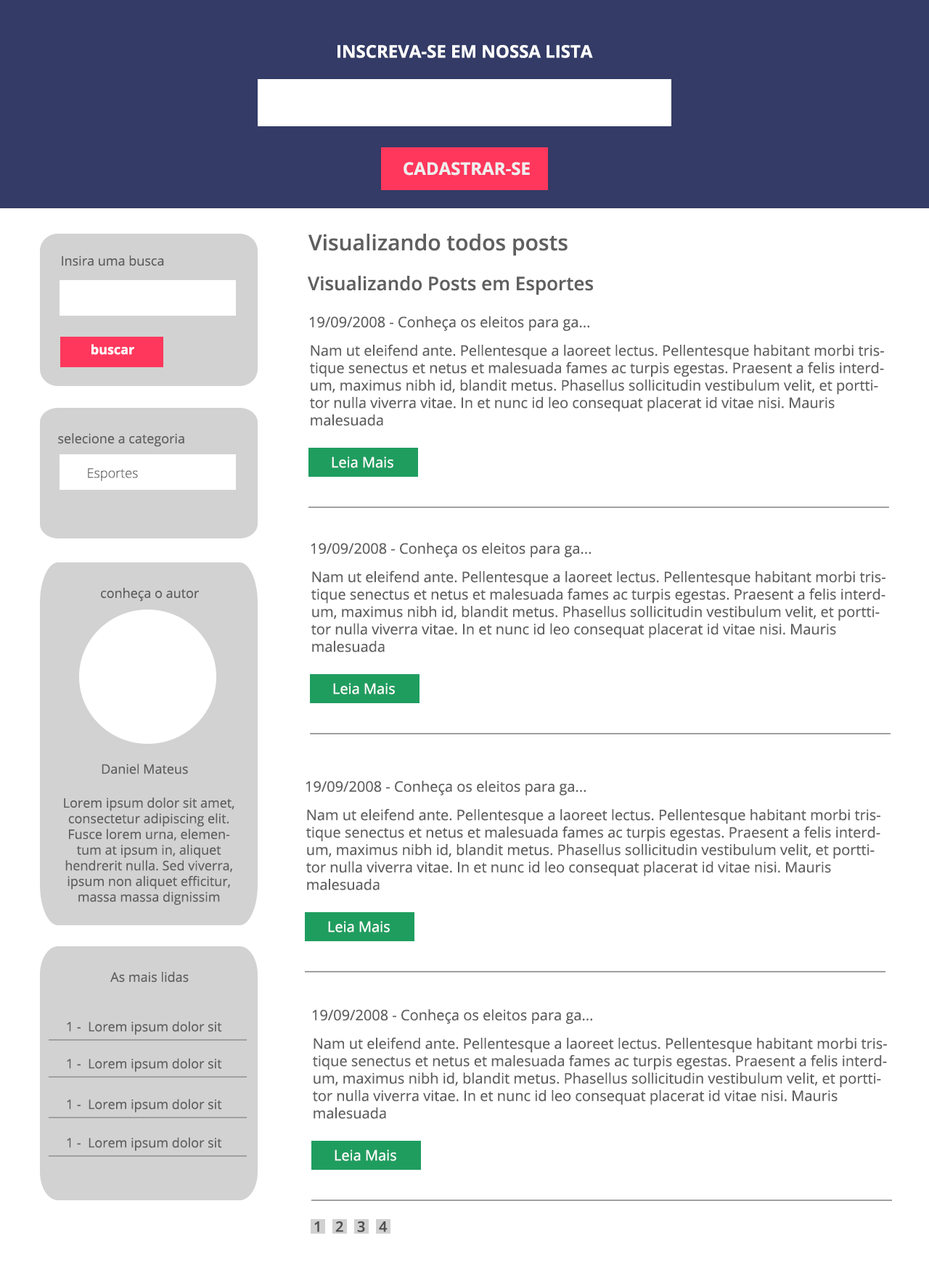
<style>
.page{position:relative;width:929px;height:1283px;background:#ffffff}
.page>*{position:absolute;margin:0}
.t1{font:17.4px "OpenSans-Bold";color:#ffffff}
.t2{font:17.4px "OpenSans-Bold";color:#eeeeee}
.t3{font:21.8px "OpenSans-SemiBold";color:#605f5f}
.t4{font:13.1px "OpenSans-Regular";color:#605f5f}
.t5{font:18.9px "OpenSans-SemiBold";color:#605f5f}
.t6{font:14.5px "OpenSans-Regular";color:#605f5f}
.t7{font:13.1px "OpenSans-Bold";color:#ffffff}
.t8{font:14.5px "OpenSans-Regular";color:#ffffff}
.t9{font:13.1px "OpenSans-Light";color:#605f5f}
.t10{font:14.5px "OpenSans-SemiBold";color:#505050}
</style>
<div class="page">
<p class="t1" style="left:338px;top:45px;width:255px;height:13px">INSCREVA-SE EM NOSSA LISTA</p>
<p class="t2" style="left:404px;top:162px;width:126px;height:14px">CADASTRAR-SE</p>
<p class="t3" style="left:308px;top:234px;width:260px;height:22px">Visualizando todos posts</p>
<p class="t4" style="left:62px;top:256px;width:102px;height:10px">Insira uma busca</p>
<p class="t5" style="left:308px;top:276px;width:285px;height:19px">Visualizando Posts em Esportes</p>
<p class="t6" style="left:309px;top:316px;width:280px;height:15px">19/09/2008 - Conheça os eleitos para ga...</p>
<p class="t7" style="left:91px;top:344px;width:43px;height:11px">buscar</p>
<p class="t6" style="left:310px;top:344px;width:574px;height:82px">Nam ut eleifend ante. Pellentesque a laoreet lectus. Pellentesque habitant morbi tristique senectus et netus et malesuada fames ac turpis egestas. Praesent a felis interdum, maximus nibh id, blandit metus. Phasellus sollicitudin vestibulum velit, et porttitor nulla viverra vitae. In et nunc id leo consequat placerat id vitae nisi. Mauris malesuada</p>
<p class="t4" style="left:58px;top:433px;width:126px;height:14px">selecione a categoria</p>
<p class="t8" style="left:332px;top:457px;width:61px;height:11px">Leia Mais</p>
<p class="t9" style="left:88px;top:468px;width:50px;height:13px">Esportes</p>
<p class="t6" style="left:311px;top:542px;width:280px;height:15px">19/09/2008 - Conheça os eleitos para ga...</p>
<p class="t6" style="left:311px;top:571px;width:575px;height:82px">Nam ut eleifend ante. Pellentesque a laoreet lectus. Pellentesque habitant morbi tristique senectus et netus et malesuada fames ac turpis egestas. Praesent a felis interdum, maximus nibh id, blandit metus. Phasellus sollicitudin vestibulum velit, et porttitor nulla viverra vitae. In et nunc id leo consequat placerat id vitae nisi. Mauris malesuada</p>
<p class="t4" style="left:101px;top:588px;width:98px;height:14px">conheça o autor</p>
<p class="t8" style="left:333px;top:683px;width:62px;height:12px">Leia Mais</p>
<p class="t4" style="left:102px;top:764px;width:86px;height:11px">Daniel Mateus</p>
<p class="t6" style="left:306px;top:780px;width:280px;height:16px">19/09/2008 - Conheça os eleitos para ga...</p>
<p class="t4" style="left:64px;top:798px;width:170px;height:107px;text-align:center">Lorem ipsum dolor sit amet, consectetur adipiscing elit. Fusce lorem urna, elementum at ipsum in, aliquet hendrerit nulla. Sed viverra, ipsum non aliquet efficitur, massa massa dignissim massa,</p>
<p class="t6" style="left:306px;top:809px;width:575px;height:82px">Nam ut eleifend ante. Pellentesque a laoreet lectus. Pellentesque habitant morbi tristique senectus et netus et malesuada fames ac turpis egestas. Praesent a felis interdum, maximus nibh id, blandit metus. Phasellus sollicitudin vestibulum velit, et porttitor nulla viverra vitae. In et nunc id leo consequat placerat id vitae nisi. Mauris malesuada</p>
<p class="t8" style="left:328px;top:921px;width:62px;height:12px">Leia Mais</p>
<p class="t4" style="left:110px;top:972px;width:79px;height:11px">As mais lidas</p>
<p class="t6" style="left:312px;top:1009px;width:280px;height:15px">19/09/2008 - Conheça os eleitos para ga...</p>
<p class="t4" style="left:67px;top:1021px;width:155px;height:14px">1 -  Lorem ipsum dolor sit</p>
<p class="t6" style="left:313px;top:1037px;width:574px;height:82px">Nam ut eleifend ante. Pellentesque a laoreet lectus. Pellentesque habitant morbi tristique senectus et netus et malesuada fames ac turpis egestas. Praesent a felis interdum, maximus nibh id, blandit metus. Phasellus sollicitudin vestibulum velit, et porttitor nulla viverra vitae. In et nunc id leo consequat placerat id vitae nisi. Mauris malesuada</p>
<p class="t4" style="left:67px;top:1058px;width:155px;height:14px">1 -  Lorem ipsum dolor sit</p>
<p class="t4" style="left:67px;top:1099px;width:155px;height:14px">1 -  Lorem ipsum dolor sit</p>
<p class="t4" style="left:67px;top:1137px;width:155px;height:14px">1 -  Lorem ipsum dolor sit</p>
<p class="t8" style="left:335px;top:1150px;width:61px;height:11px">Leia Mais</p>
<p class="t10" style="left:314px;top:1222px;width:5px;height:11px">1</p>
<p class="t10" style="left:335px;top:1222px;width:8px;height:11px">2</p>
<p class="t10" style="left:357px;top:1222px;width:8px;height:11px">3</p>
<p class="t10" style="left:379px;top:1222px;width:9px;height:11px">4</p>
</div>
